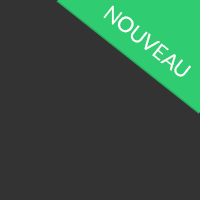
<style>
.page{position:relative;width:200px;height:200px;background:#333333}
.page>*{position:absolute;margin:0}
.t1{font:21px "Lato-Regular";color:#ffffff;text-transform:uppercase}
</style>
<div class="page">
<p class="t1" style="left:103px;top:5px;width:88px;height:72px;rotate:38deg">Nouveau</p>
</div>
